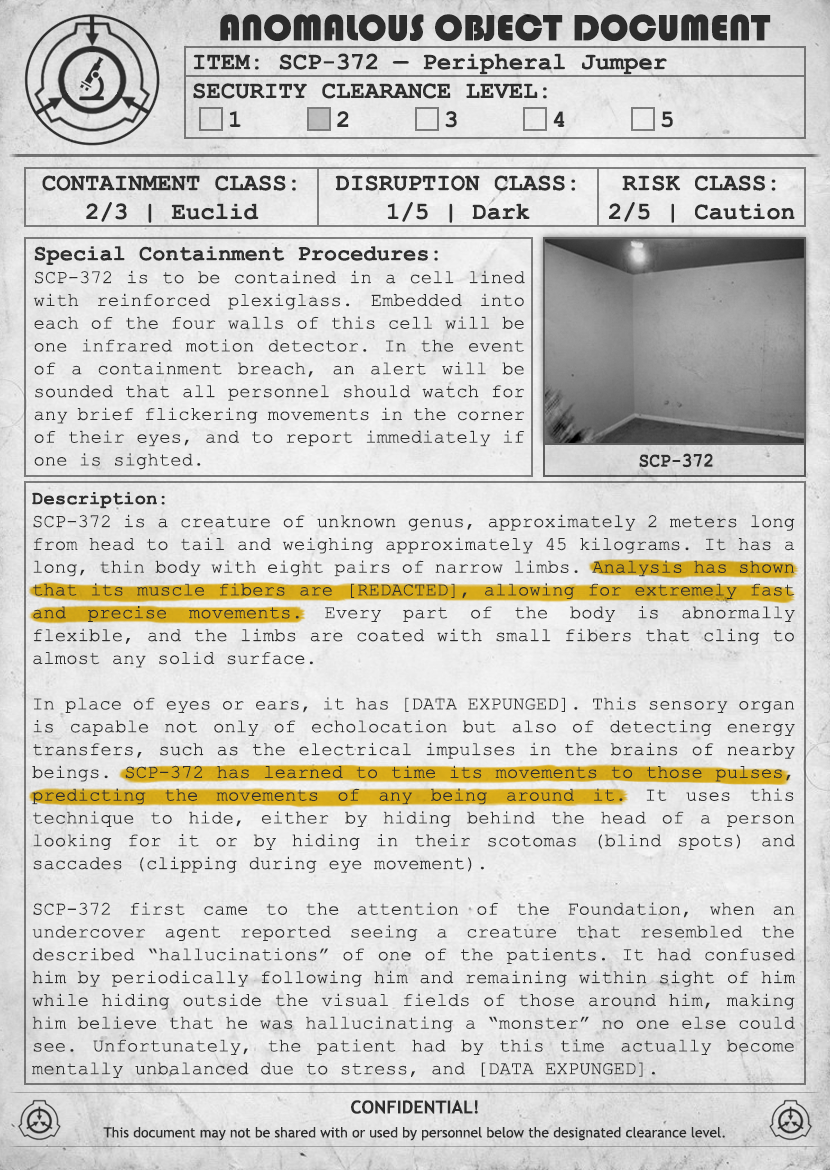
<style>
.page{position:relative;width:830px;height:1170px}
.page>*{position:absolute;margin:0}
.t1{font:38px "Bauhaus93";color:#333333;text-transform:uppercase}
.t2{font:24px "CourierNewPS-BoldMT";color:#333333}
.t3{font:24px "CourierNewPS-BoldMT";color:#333333;text-transform:uppercase}
.t4{font:19px "CourierNewPSMT";color:#333333}
.t5{font:22px "CourierNewPS-BoldMT";color:#333333}
.t6{font:20.1px "CourierNewPS-BoldMT";color:#333333;scale:0.9 1}
.t7{font:19px "CourierNewPS-BoldMT";color:#333333}
.t8{font:14px/24px "TrebuchetMS";color:#333333}
.t9{font:18px/24px "TrebuchetMS-Bold";color:#333333}
</style>
<div class="page">
<p class="t1" style="left:220px;top:14px;width:551px;height:27px">anomalous object document</p>
<p class="t2" style="left:193px;top:53px;width:480px;height:75px">ITEM: SCP-372 — Peripheral Jumper<br><span class="t3">Security CLEARANCE LEVEL:</span> <br> 1   2   3   4   5</p>
<p class="t2" style="left:42px;top:175px;width:254px;height:48px;text-align:center">CONTAINMENT CLASS:<br>2/3 | Euclid</p>
<p class="t2" style="left:335px;top:175px;width:241px;height:48px;text-align:center">DISRUPTION CLASS:<br>1/5 | Dark</p>
<p class="t2" style="left:609px;top:175px;width:186px;height:48px;text-align:center">RISK CLASS:<br>2/5 | Caution</p>
<p class="t4" style="left:33px;top:246px;width:492px;height:224px;text-align:justify"><span class="t5">Special Containment Procedures: <br></span>SCP-372 is to be contained in a cell lined with reinforced plexiglass. Embedded into each of the four walls of this cell will be one infrared motion detector. In the event of a containment breach, an alert will be sounded that all personnel should watch for any brief flickering movements in the corner of their eyes, and to report immediately if one is sighted.</p>
<p class="t6" style="left:639px;top:453px;width:74px;height:15px">SCP-372</p>
<p class="t4" style="left:32px;top:492px;width:763px;height:586px;text-align:justify"><span class="t7">Description:<br></span>SCP-372 is a creature of unknown genus, approximately 2 meters long from head to tail and weighing approximately 45 kilograms. It has a long, thin body with eight pairs of narrow limbs. Analysis has shown that its muscle fibers are [REDACTED], allowing for extremely fast and precise movements. Every part of the body is abnormally flexible, and the limbs are coated with small fibers that cling to almost any solid surface.<br><br>In place of eyes or ears, it has [DATA EXPUNGED]. This sensory organ is capable not only of echolocation but also of detecting energy transfers, such as the electrical impulses in the brains of nearby beings. SCP-372 has learned to time its movements to those pulses, predicting the movements of any being around it. It uses this technique to hide, either by hiding behind the head of a person looking for it or by hiding in their scotomas (blind spots) and saccades (clipping during eye movement).<br><br>SCP-372 first came to the attention of the Foundation, when an undercover agent reported seeing a creature that resembled the described “hallucinations” of one of the patients. It had confused him by periodically following him and remaining within sight of him while hiding outside the visual fields of those around him, making him believe that he was hallucinating a “monster” no one else could see. Unfortunately, the patient had by this time actually become mentally unbalanced due to stress, and [DATA EXPUNGED].</p>
<p class="t8" style="left:103px;top:1100px;width:622px;height:41px;text-align:center"><span class="t9">CONFIDENTIAL!<br></span>This document may not be shared with or used by personnel below the designated clearance level.</p>
</div>
